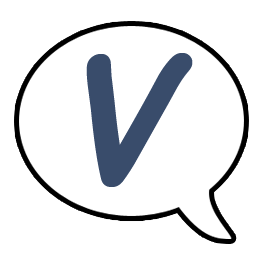
<style>
.page{position:relative;width:264px;height:264px;background:#ffffff}
.page>*{position:absolute;margin:0}
.t1{font:170px "ComicSansMS-Bold";letter-spacing:0.1em;color:#394c6b;font-style:italic}
</style>
<div class="page">
<p class="t1" style="left:86px;top:53px;width:107px;height:134px">V</p>
</div>
